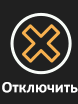
<style>
.page{position:relative;width:78px;height:104px;background:#202020}
.page>*{position:absolute;margin:0}
.t1{font:12px "Calibri-Bold";color:#ffffff}
</style>
<div class="page">
<p class="t1" style="left:2px;top:82px;width:76px;height:11px">Отключить</p>
</div>
